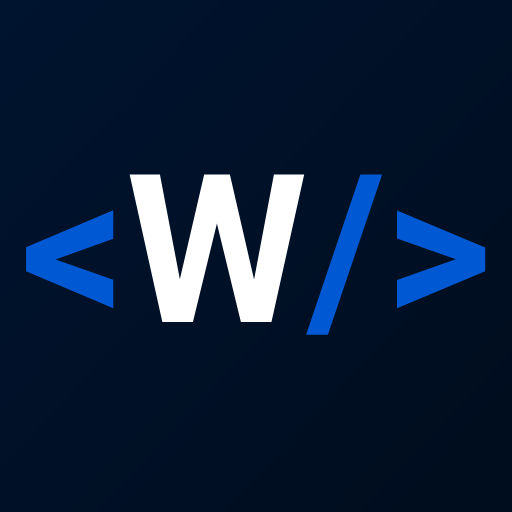
<style>
.page{position:relative;width:512px;height:512px}
.page>*{position:absolute;margin:0}
.t1{font:207.3px "Roboto-Bold";color:#0059d2}
.t2{font:207.3px "Roboto-Bold";color:#ffffff}
</style>
<div class="page">
<p class="t1" style="left:26px;top:174px;width:460px;height:161px">&lt;<span class="t2">W</span>/&gt;</p>
</div>
